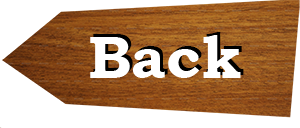
<style>
.page{position:relative;width:300px;height:128px;background:#ffffff}
.page>*{position:absolute;margin:0}
.t1{font:60px "BookmanOldStyle-Bold"}
</style>
<div class="page">
<p class="t1" style="left:93px;top:32px;width:151px;height:43px">Back</p>
</div>
